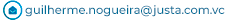
<style>
.page{position:relative;width:228px;height:21px;background:#ffffff}
.page>*{position:absolute;margin:0}
.t1{font:11.4px "Montserrat-Medium";color:#006e98}
</style>
<div class="page">
<p class="t1" style="left:25px;top:5px;width:200px;height:12px">guilherme.nogueira@justa.com.vc</p>
</div>
